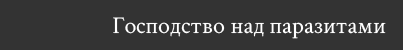
<style>
.page{position:relative;width:403px;height:50px;background:#333333}
.page>*{position:absolute;margin:0}
.t1{font:24px "CrimsonText-Regular";color:#ffffff}
</style>
<div class="page">
<p class="t1" style="left:113px;top:17px;width:273px;height:22px">Господство над паразитами</p>
</div>
